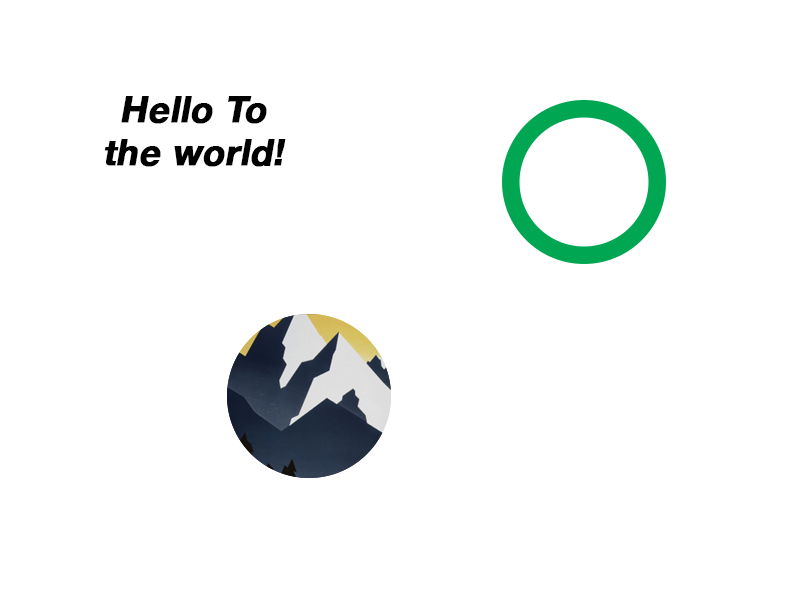
<style>
.page{position:relative;width:800px;height:600px;background:#ffffff}
.page>*{position:absolute;margin:0}
.t1{font:36px "HelveticaNeue-Bold";color:#000000;font-weight:bold;font-style:italic}
</style>
<div class="page">
<p class="t1" style="left:104px;top:96px;width:182px;height:71px;text-align:center">Hello To the world!</p>
</div>
